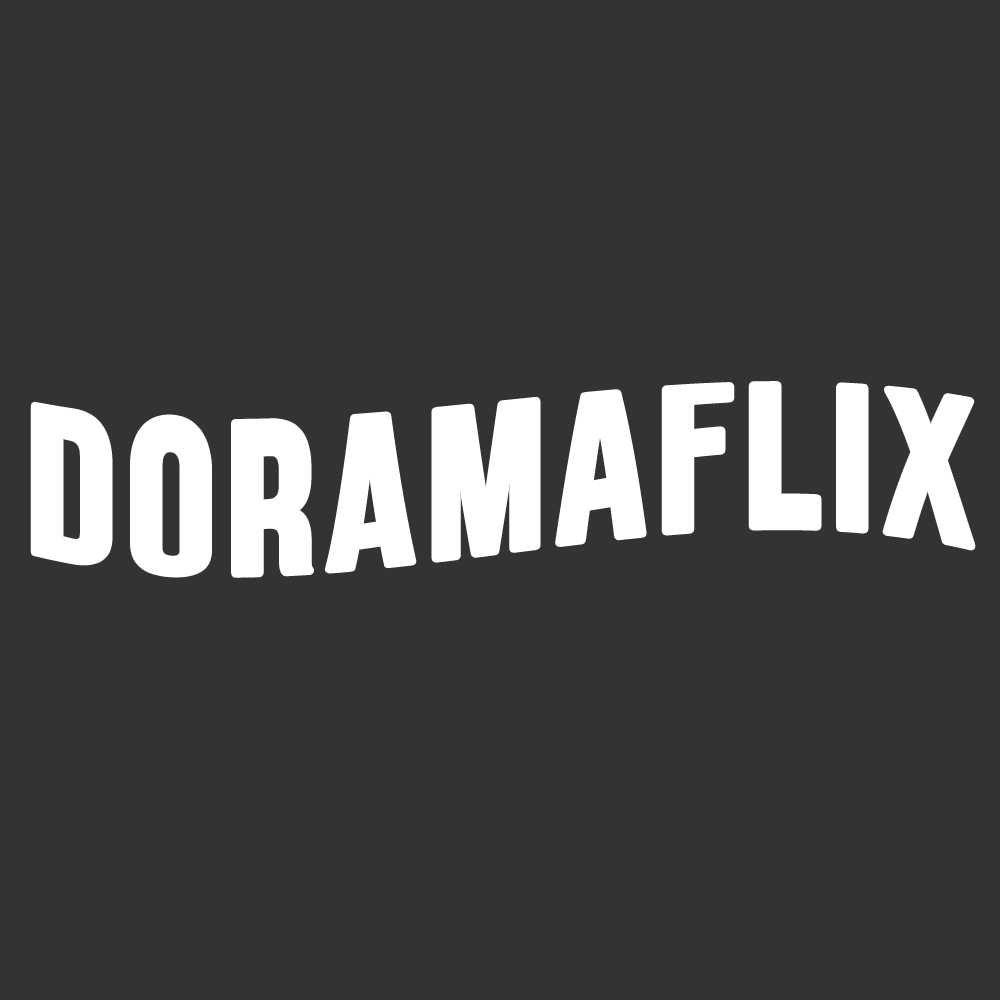
<style>
.page{position:relative;width:1000px;height:1000px;background:#333333}
.page>*{position:absolute;margin:0}
.t1{font:208.3px "BebasNeue-Regular";letter-spacing:0.05em;color:#ffffff;scale:1.06 1}
</style>
<div class="page">
<p class="t1" style="left:34px;top:385px;width:938px;height:189px">Doramaflix</p>
</div>
